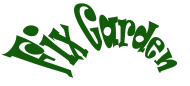
<style>
.page{position:relative;width:190px;height:86px;background:#ffffff}
.page>*{position:absolute;margin:0}
.t1{font:18px "Ravie";color:#135c0b}
</style>
<div class="page">
<p class="t1" style="left:1px;top:3px;width:177px;height:75px">Fix Garden</p>
</div>
